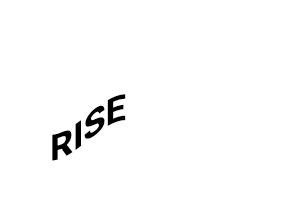
<style>
.page{position:relative;width:300px;height:200px;background:#ffffff}
.page>*{position:absolute;margin:0}
.t1{font:36px "Roboto-Bold";color:#000000}
</style>
<div class="page">
<p class="t1" style="left:52px;top:94px;width:74px;height:67px">RISE</p>
</div>
